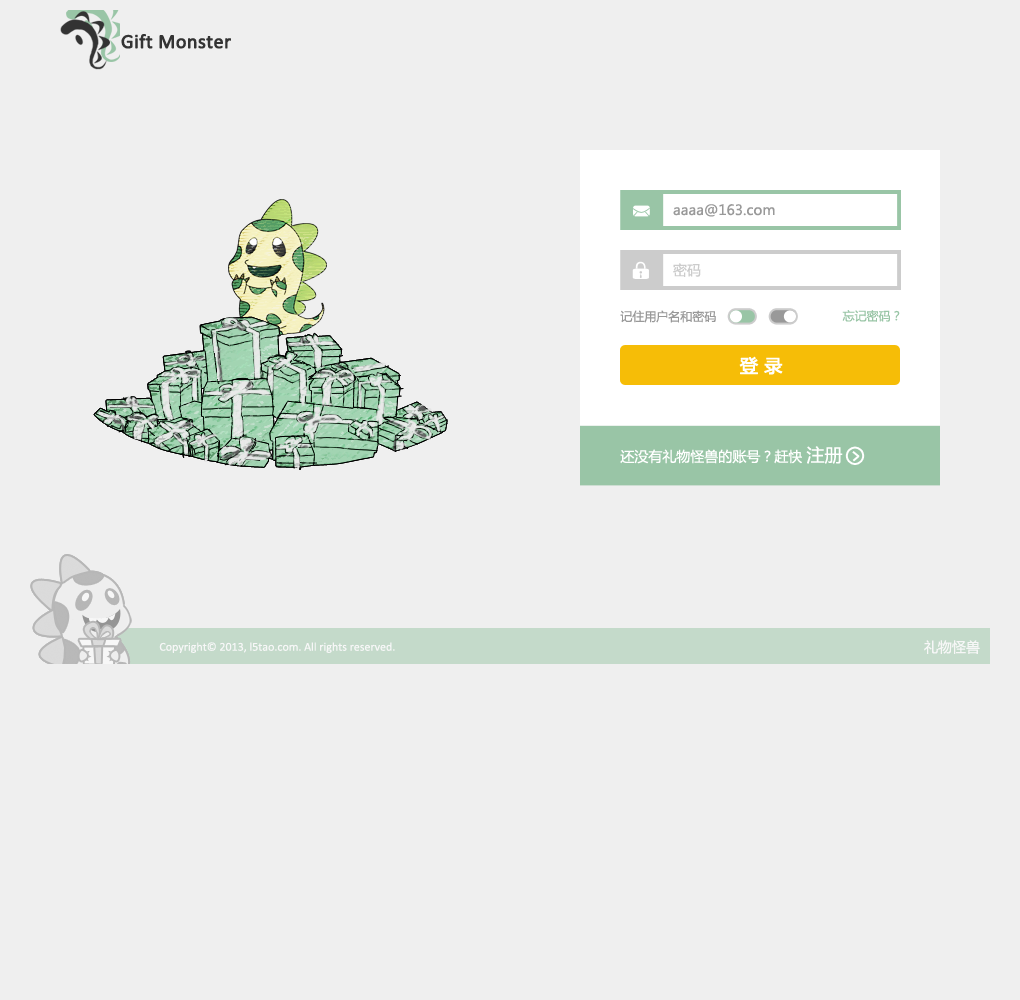
<style>
.page{position:relative;width:1020px;height:1000px;background:#efefef}
.page>*{position:absolute;margin:0}
.t1{font:20px "Calibri";color:#333333;font-weight:bold}
.t2{font:14px "MicrosoftYaHei";color:#999999}
.t3{font:14px "MicrosoftYaHei";color:#cccccc}
.t4{font:12px "MicrosoftYaHei";color:#999999}
.t5{font:12px "MicrosoftYaHei";color:#99c5a6}
.t6{font:18px "MicrosoftYaHei";color:#ffffff;font-weight:bold}
.t7{font:14px "MicrosoftYaHei";color:#ffffff}
.t8{font:18px "MicrosoftYaHei";color:#ffffff}
.t9{font:12px "Calibri";color:#ffffff}
</style>
<div class="page">
<p class="t1" style="left:121px;top:34px;width:110px;height:15px">Gift Monster</p>
<p class="t2" style="left:673px;top:204px;width:102px;height:13px">aaaa@163.com</p>
<p class="t3" style="left:673px;top:263px;width:28px;height:14px">密码</p>
<p class="t4" style="left:620px;top:310px;width:96px;height:13px">记住用户名和密码</p>
<p class="t5" style="left:842px;top:310px;width:58px;height:12px">忘记密码？</p>
<p class="t6" style="left:739px;top:356px;width:44px;height:19px">登 录</p>
<p class="t7" style="left:620px;top:446px;width:223px;height:18px">还没有礼物怪兽的账号？赶快 <span class="t8">注册</span></p>
<p class="t7" style="left:924px;top:640px;width:56px;height:14px">礼物怪兽</p>
<p class="t9" style="left:159px;top:642px;width:236px;height:11px">Copyright© 2013, l5tao.com. All rights reserved.</p>
</div>
